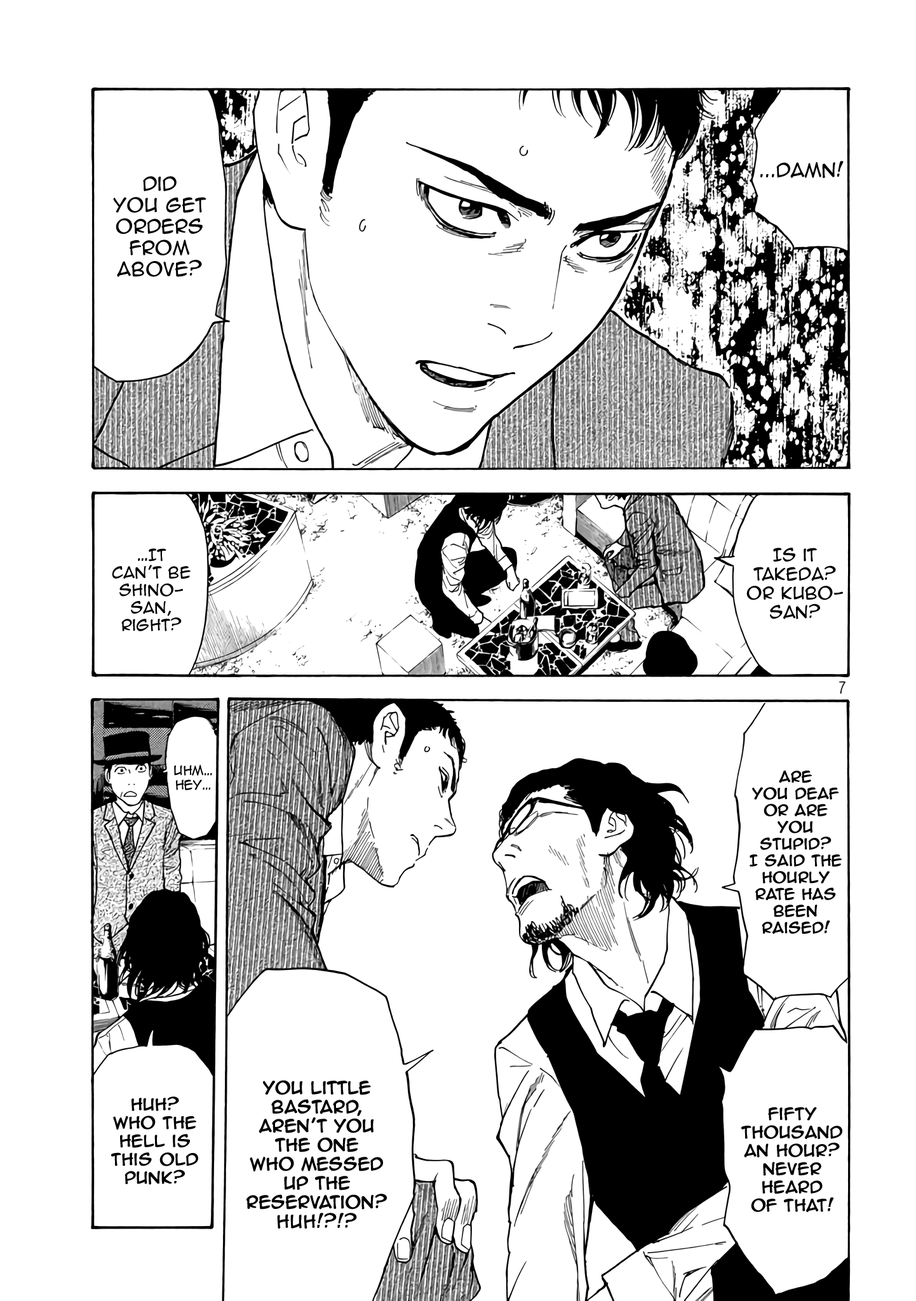
<style>
.page{position:relative;width:916px;height:1301px;background:#ffffff}
.page>*{position:absolute;margin:0}
.t1{font:17.8px "AnimeAce2.0BB";color:#000000}
.t2{font:14.6px "AnimeAce2.0BB";color:#000000}
.t3{font:15.9px "AnimeAce2.0BB";color:#000000}
.t4{font:12.1px "AnimeAce2.0BB";color:#000000}
.t5{font:14px "AnimeAce2.0BB";color:#000000;font-weight:bold}
.t6{font:15.9px "AnimeAce2.0BB";color:#000000;font-weight:bold}
.t7{font:16.5px "AnimeAce2.0BB";color:#000000;font-weight:bold}
.t8{font:15.3px "AnimeAce2.0BB";color:#000000;font-weight:bold}
</style>
<div class="page">
<p class="t1" style="left:761px;top:161px;width:83px;height:18px">...Damn!</p>
<p class="t1" style="left:113px;top:176px;width:94px;height:101px;text-align:center">Did <br>you get orders from above?</p>
<p class="t2" style="left:112px;top:548px;width:79px;height:84px;text-align:center">…It<br>can’t be Shino-<br>san, right?</p>
<p class="t3" style="left:747px;top:548px;width:96px;height:72px;text-align:center">Is it Takeda?<br>Or Kubo-<br>san?</p>
<p class="t4" style="left:174px;top:765px;width:38px;height:25px;text-align:center">Uhm… hey…</p>
<p class="t5" style="left:750px;top:771px;width:92px;height:163px;text-align:center">Are <br>you deaf<br>or are <br>you stupid? <br>I said the hourly rate has <br>been raised!</p>
<p class="t6" style="left:247px;top:1080px;width:140px;height:149px;text-align:center">You little bastard,<br>aren’t you <br>the one <br>who messed up the reservation? <span class="t7">Huh!?!?</span></p>
<p class="t8" style="left:111px;top:1097px;width:87px;height:88px;text-align:center">Huh? <br>Who the hell is this old punk?</p>
<p class="t8" style="left:742px;top:1108px;width:101px;height:104px;text-align:center">Fifty thousand an hour? Never heard <br>of that!</p>
</div>
